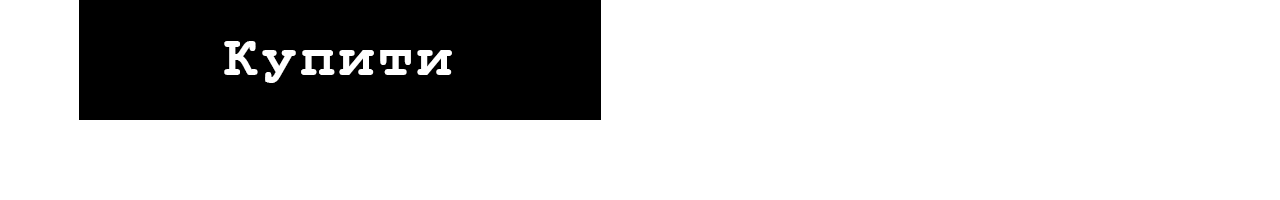
<style>
.page{position:relative;width:1280px;height:200px;background:#ffffff}
.page>*{position:absolute;margin:0}
.t1{font:59px "CourierNewPS-BoldMT";letter-spacing:0.06em;color:#ffffff}
</style>
<div class="page">
<p class="t1" style="left:224px;top:41px;width:228px;height:42px">Купити</p>
</div>
